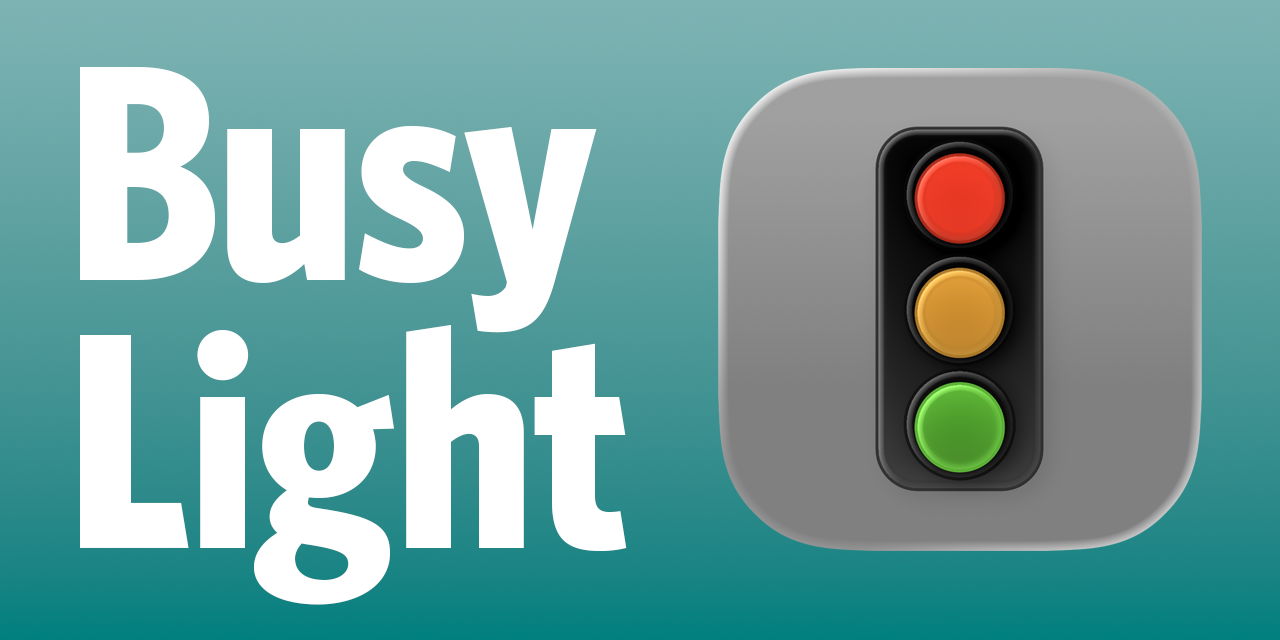
<style>
.page{position:relative;width:1280px;height:640px}
.page>*{position:absolute;margin:0}
.t1{font:308.9px/267.7px "WhitneyHTF-BoldCondensed";color:#ffffff}
</style>
<div class="page">
<p class="t1" style="left:80px;top:67px;width:547px;height:538px">Busy<br>Light</p>
</div>
